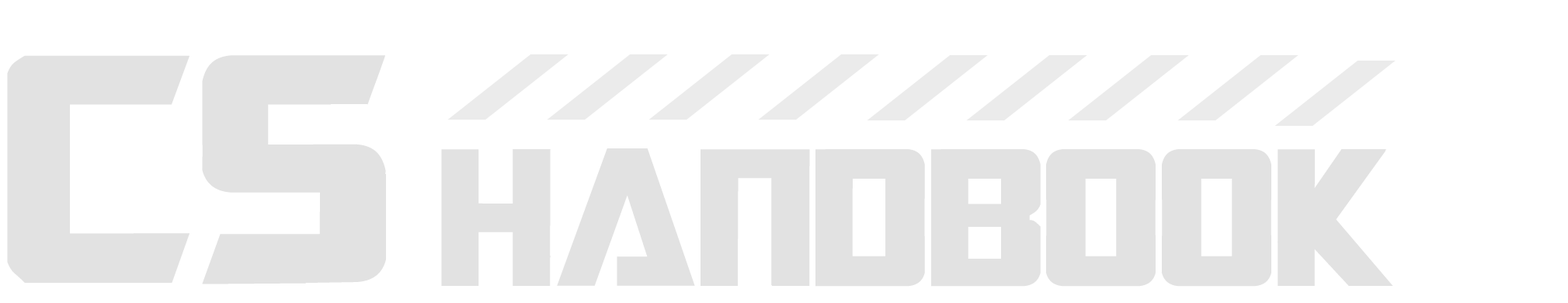
<style>
.page{position:relative;width:1568px;height:303px;background:#ffffff}
.page>*{position:absolute;margin:0}
.t1{font:363.9px "TransformersMovie";color:#e2e2e2}
.t2{font:218.5px "TransformersMovie";color:#e2e2e2}
</style>
<div class="page">
<p class="t1" style="left:7px;top:55px;width:379px;height:229px">CS</p>
<p class="t2" style="left:441px;top:148px;width:952px;height:139px">Handbook</p>
</div>
